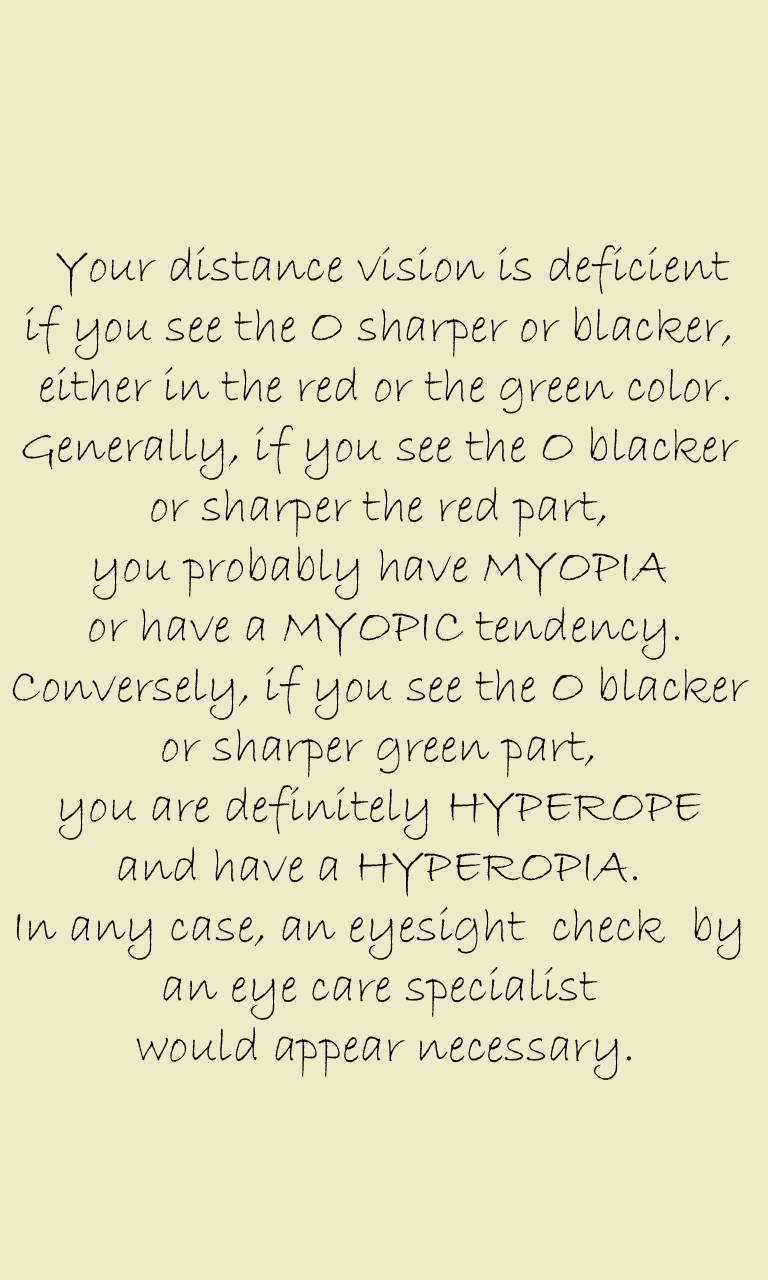
<style>
.page{position:relative;width:768px;height:1280px;background:#edebc7}
.page>*{position:absolute;margin:0}
.t1{font:50px "BradleyHandITC";color:#070100}
</style>
<div class="page">
<p class="t1" style="left:12px;top:245px;width:737px;height:835px;text-align:center">Your distance vision is deficient <br>if you see the O sharper or blacker, <br>either in the red or the green color.<br>Generally, if you see the O blacker <br>or sharper the red part, <br>you probably have MYOPIA <br>or have a MYOPIC tendency.<br>Conversely, if you see the O blacker <br>or sharper green part, <br>you are definitely HYPEROPE <br>and have a HYPEROPIA. <br>In any case, an eyesight  check  by <br>an eye care specialist <br>would appear necessary.</p>
</div>
